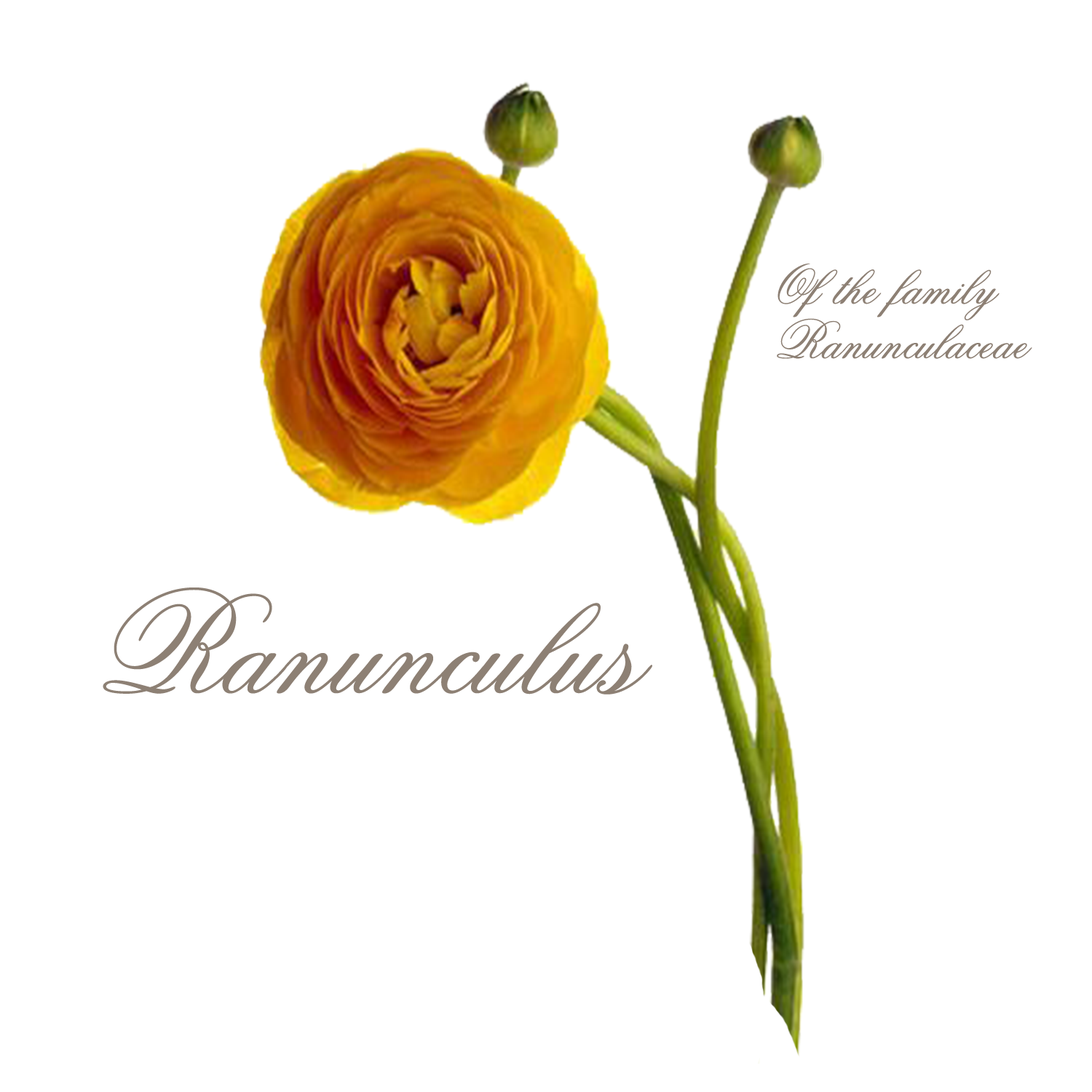
<style>
.page{position:relative;width:1092px;height:1092px;background:#ffffff}
.page>*{position:absolute;margin:0}
.t1{font:54.6px/54.6px "Old-Scrip";color:#8d8074}
.t2{font:145.6px "Old-Scrip";color:#8d8074}
</style>
<div class="page">
<p class="t1" style="left:777px;top:264px;width:255px;height:95px">Of the family<br>Ranunculaceae</p>
<p class="t2" style="left:103px;top:587px;width:549px;height:108px">Ranunculus</p>
</div>
